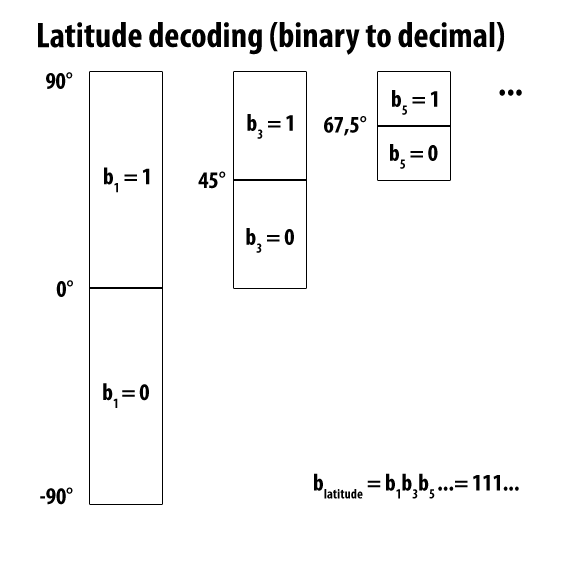
<style>
.page{position:relative;width:576px;height:576px;background:#ffffff}
.page>*{position:absolute;margin:0}
.t1{font:36px "MyriadPro-BoldCond";color:#000000}
.t2{font:24px "MyriadPro-BoldCond";color:#000000}
</style>
<div class="page">
<p class="t1" style="left:38px;top:22px;width:467px;height:33px">Latitude decoding (binary to decimal)</p>
<p class="t2" style="left:46px;top:72px;width:27px;height:17px">90°</p>
<p class="t1" style="left:499px;top:89px;width:23px;height:7px;rotate:-180deg">...</p>
<p class="t2" style="left:392px;top:90px;width:46px;height:25px">b5 = 1</p>
<p class="t2" style="left:247px;top:114px;width:46px;height:25px">b3 = 1</p>
<p class="t2" style="left:324px;top:116px;width:43px;height:20px">67,5°</p>
<p class="t2" style="left:390px;top:144px;width:48px;height:25px">b5 = 0</p>
<p class="t2" style="left:104px;top:167px;width:46px;height:26px">b1 = 1</p>
<p class="t2" style="left:198px;top:171px;width:28px;height:18px">45°</p>
<p class="t2" style="left:246px;top:228px;width:48px;height:25px">b3 = 0</p>
<p class="t2" style="left:56px;top:280px;width:17px;height:17px">0°</p>
<p class="t2" style="left:103px;top:383px;width:46px;height:25px">b1 = 0</p>
<p class="t2" style="left:314px;top:473px;width:205px;height:26px">blatitude = b1b3b5 ...= 111...</p>
<p class="t2" style="left:40px;top:487px;width:33px;height:18px">-90°</p>
</div>
